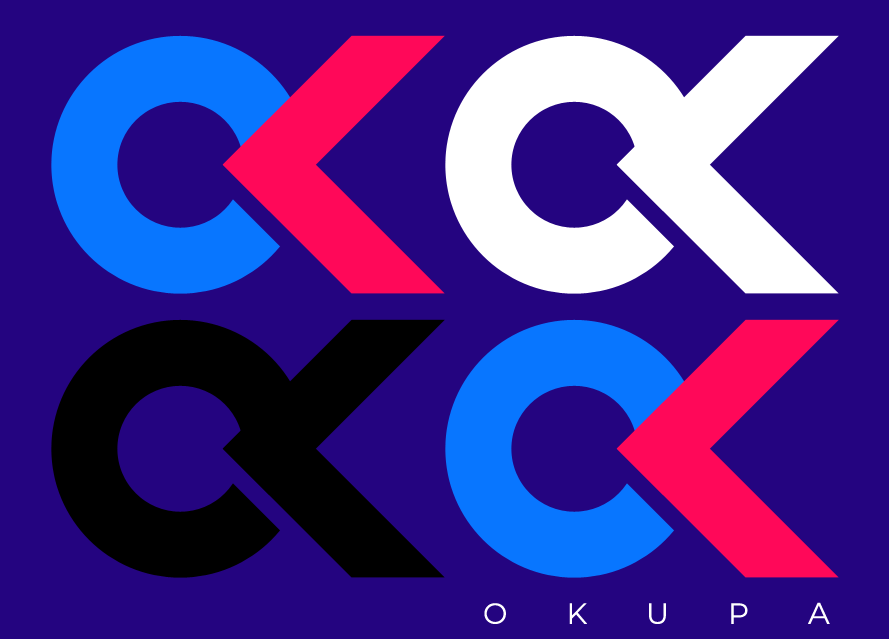
<style>
.page{position:relative;width:889px;height:639px;background:#240480}
.page>*{position:absolute;margin:0}
.t1{font:29px "Montserrat-Regular";letter-spacing:2.04em;color:#ffffff;text-transform:uppercase}
.t2{font:30px "Montserrat-Regular";letter-spacing:2.04em;color:#ffffff;text-transform:uppercase}
</style>
<div class="page">
<p class="t1" style="left:484px;top:602px;width:346px;height:22px">OKUP<span class="t2">A</span></p>
</div>
